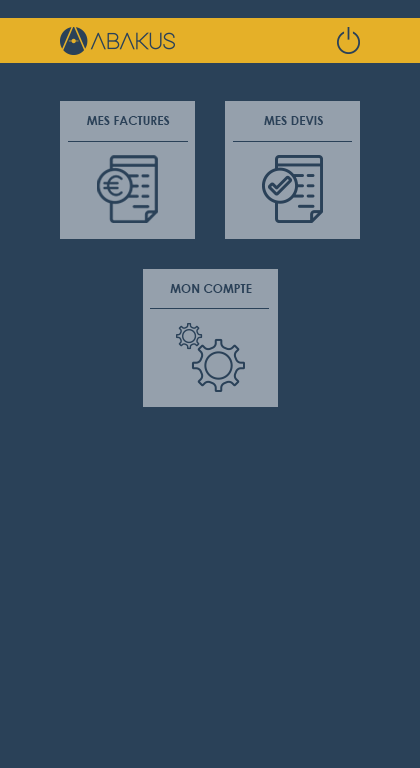
<style>
.page{position:relative;width:420px;height:768px;background:#2a4158}
.page>*{position:absolute;margin:0}
.t1{font:12.1px "CenturyGothic-Bold";color:#2a4158;text-transform:uppercase}
</style>
<div class="page">
<p class="t1" style="left:87px;top:116px;width:83px;height:9px">Mes factures</p>
<p class="t1" style="left:264px;top:116px;width:59px;height:9px">Mes devis</p>
<p class="t1" style="left:170px;top:284px;width:82px;height:9px">mon compte</p>
</div>
